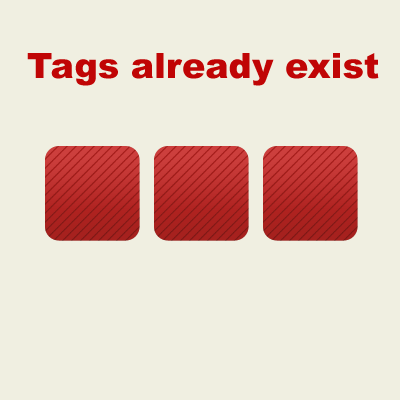
<style>
.page{position:relative;width:400px;height:400px;background:#f0efe1}
.page>*{position:absolute;margin:0}
.t1{font:35px "Arial-Black";color:#c00505}
</style>
<div class="page">
<p class="t1" style="left:27px;top:53px;width:352px;height:33px">Tags already exist</p>
</div>
